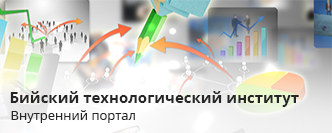
<style>
.page{position:relative;width:332px;height:133px}
.page>*{position:absolute;margin:0}
.t1{font:15px "OpenSans-Bold";color:#262626}
.t2{font:13px "OpenSans";color:#262626}
</style>
<div class="page">
<p class="t1" style="left:10px;top:91px;width:289px;height:16px">Бийский технологический институт</p>
<p class="t2" style="left:11px;top:110px;width:124px;height:13px">Внутренний портал</p>
</div>
